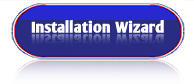
<style>
.page{position:relative;width:194px;height:84px;background:#ffffff}
.page>*{position:absolute;margin:0}
.t1{font:15px "OliJo-Bold";color:#ffffff}
</style>
<div class="page">
<p class="t1" style="left:31px;top:19px;width:133px;height:14px">Installation Wizard</p>
</div>
